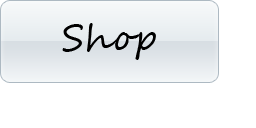
<style>
.page{position:relative;width:256px;height:128px;background:#ffffff}
.page>*{position:absolute;margin:0}
.t1{font:36px "SegoeScript";color:#000000}
</style>
<div class="page">
<p class="t1" style="left:62px;top:23px;width:94px;height:37px">Shop</p>
</div>
